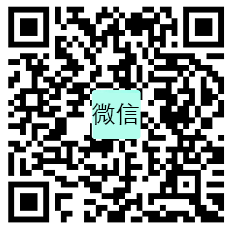
<style>
.page{position:relative;width:231px;height:229px;background:#ffffff}
.page>*{position:absolute;margin:0}
.t1{font:24px "STHeitiSC-Light";color:#000000}
</style>
<div class="page">
<p class="t1" style="left:92px;top:103px;width:47px;height:22px">微信</p>
</div>
